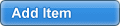
<style>
.page{position:relative;width:120px;height:26px}
.page>*{position:absolute;margin:0}
.t1{font:14px "Arial-BoldMT";color:#fcfdfe}
</style>
<div class="page">
<p class="t1" style="left:11px;top:7px;width:60px;height:11px">Add Item</p>
</div>
